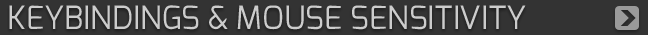
<style>
.page{position:relative;width:648px;height:35px;background:#333333}
.page>*{position:absolute;margin:0}
.t1{font:32px "Exo-Regular";color:#cccccc;text-transform:uppercase}
</style>
<div class="page">
<p class="t1" style="left:9px;top:5px;width:517px;height:25px">Keybindings &amp; Mouse Sensitivity</p>
</div>
